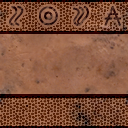
<style>
.page{position:relative;width:128px;height:128px}
.page>*{position:absolute;margin:0}
.t1{font:20.2px "Aegean";letter-spacing:0.2em;font-weight:bold}
</style>
<div class="page">
<p class="t1" style="left:9px;top:6px;width:112px;height:20px">𐘽 𐙟 𐙦 𐘡</p>
</div>
